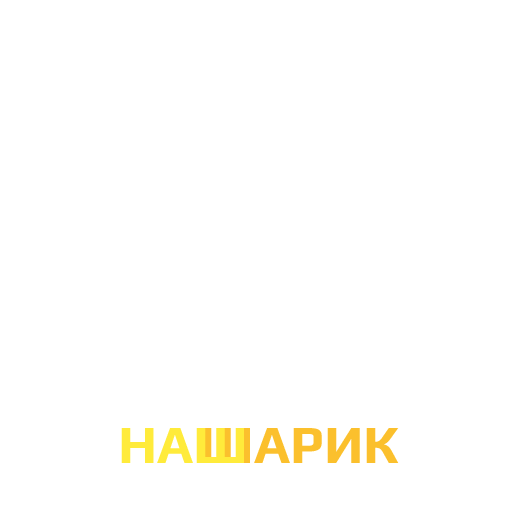
<style>
.page{position:relative;width:512px;height:512px;background:#ffffff}
.page>*{position:absolute;margin:0}
.t1{font:54px "Play-Bold";color:#ffeb3b}
.t2{font:54px "Play-Bold";color:#fbc02d}
</style>
<div class="page">
<p class="t1" style="left:121px;top:428px;width:123px;height:35px">НАШ</p>
<p class="t2" style="left:202px;top:428px;width:197px;height:35px">ШАРИК</p>
</div>
